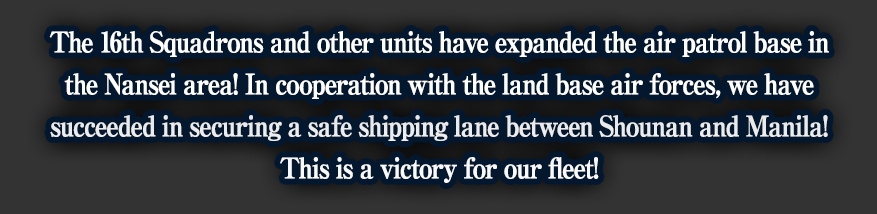
<style>
.page{position:relative;width:877px;height:214px;background:#333333}
.page>*{position:absolute;margin:0}
.t1{font:28px/42px "RyuminPro-ExBold";letter-spacing:-0.08em;color:#ffffff;font-weight:bold;scale:0.9 1}
</style>
<div class="page">
<p class="t1" style="left:49px;top:31px;width:780px;height:152px;text-align:center">The 16th Squadrons and other units have expanded the air patrol base in<br>the Nansei area! In cooperation with the land base air forces, we have<br>succeeded in securing a safe shipping lane between Shounan and Manila!<br>This is a victory for our fleet!</p>
</div>
